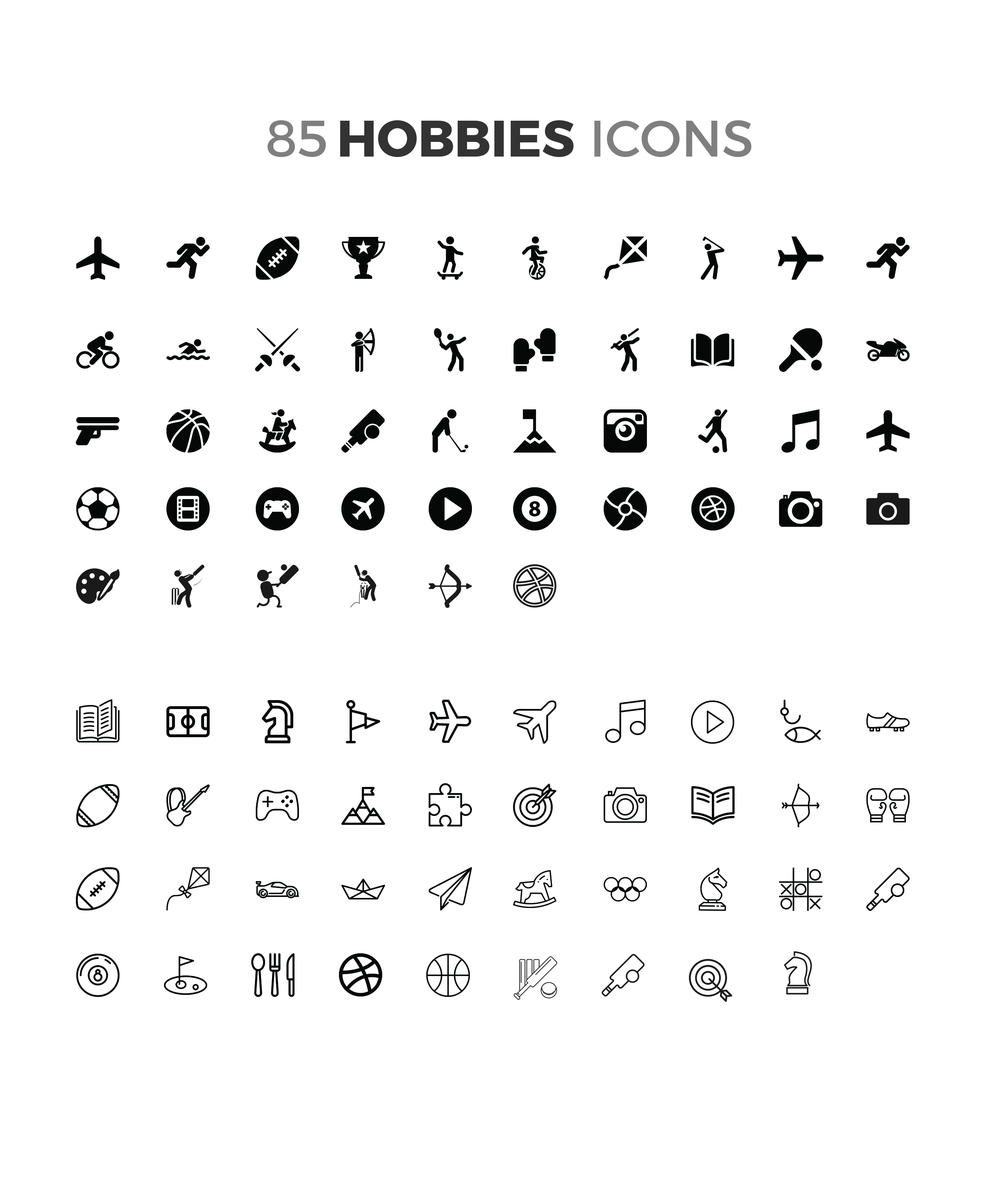
<style>
.page{position:relative;width:992px;height:1202px;background:#ffffff}
.page>*{position:absolute;margin:0}
.t1{font:51px "Montserrat-Regular";color:#808080}
.t2{font:51px "Montserrat-Bold";color:#333333}
.t3{font:51px "Montserrat-Regular";letter-spacing:-0.014em;color:#808080}
</style>
<div class="page">
<p class="t1" style="left:268px;top:120px;width:58px;height:37px">85</p>
<p class="t2" style="left:340px;top:120px;width:411px;height:37px">HOBBIES <span class="t1">I</span><span class="t3">C</span><span class="t1">ONS</span></p>
</div>
